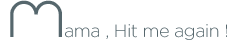
<style>
.page{position:relative;width:227px;height:40px;background:#ffffff}
.page>*{position:absolute;margin:0}
.t1{font:18px "GothamRounded-Light";letter-spacing:-0.025em;color:#56676d}
.t2{font:48px "alberto";letter-spacing:0.005em;color:#56676d}
</style>
<div class="page">
<p class="t1" style="left:10px;top:0px;width:217px;height:40px"><span class="t2">M</span>ama , Hit me again !</p>
</div>
